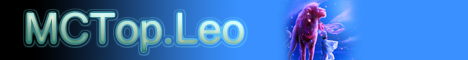
<style>
.page{position:relative;width:468px;height:60px;background:#3990fe}
.page>*{position:absolute;margin:0}
.t1{font:40.8px "Kartika"}
</style>
<div class="page">
<p class="t1" style="left:27px;top:12px;width:217px;height:40px">MCTop.Leo</p>
</div>
